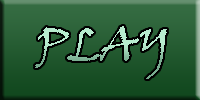
<style>
.page{position:relative;width:200px;height:100px}
.page>*{position:absolute;margin:0}
.t1{font:45px "VinerHandITC";color:#a0e6bf}
</style>
<div class="page">
<p class="t1" style="left:35px;top:26px;width:132px;height:53px">PLAY</p>
</div>
